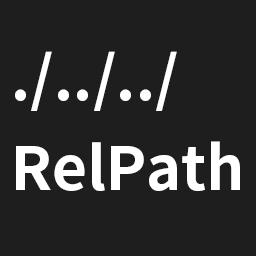
<style>
.page{position:relative;width:256px;height:256px;background:#1e1e1e}
.page>*{position:absolute;margin:0}
.t1{font:60px/90px "SourceHanSansJP-Bold";color:#ffffff}
</style>
<div class="page">
<p class="t1" style="left:15px;top:51px;width:225px;height:140px">./../../<br>RelPath</p>
</div>
